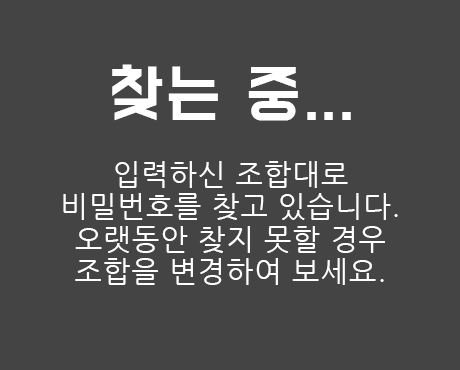
<style>
.page{position:relative;width:460px;height:370px;background:#444444}
.page>*{position:absolute;margin:0}
.t1{font:57px "BMDoHyeon";letter-spacing:0.06em;color:#ffffff}
.t2{font:29px/32.4px "NanumGothic";letter-spacing:0.04em;color:#ffffff}
</style>
<div class="page">
<p class="t1" style="left:112px;top:64px;width:239px;height:57px">찾는 중...</p>
<p class="t2" style="left:63px;top:161px;width:335px;height:124px;text-align:center">입력하신 조합대로<br>비밀번호를 찾고 있습니다.<br>오랫동안 찾지 못할 경우<br>조합을 변경하여 보세요.</p>
</div>
